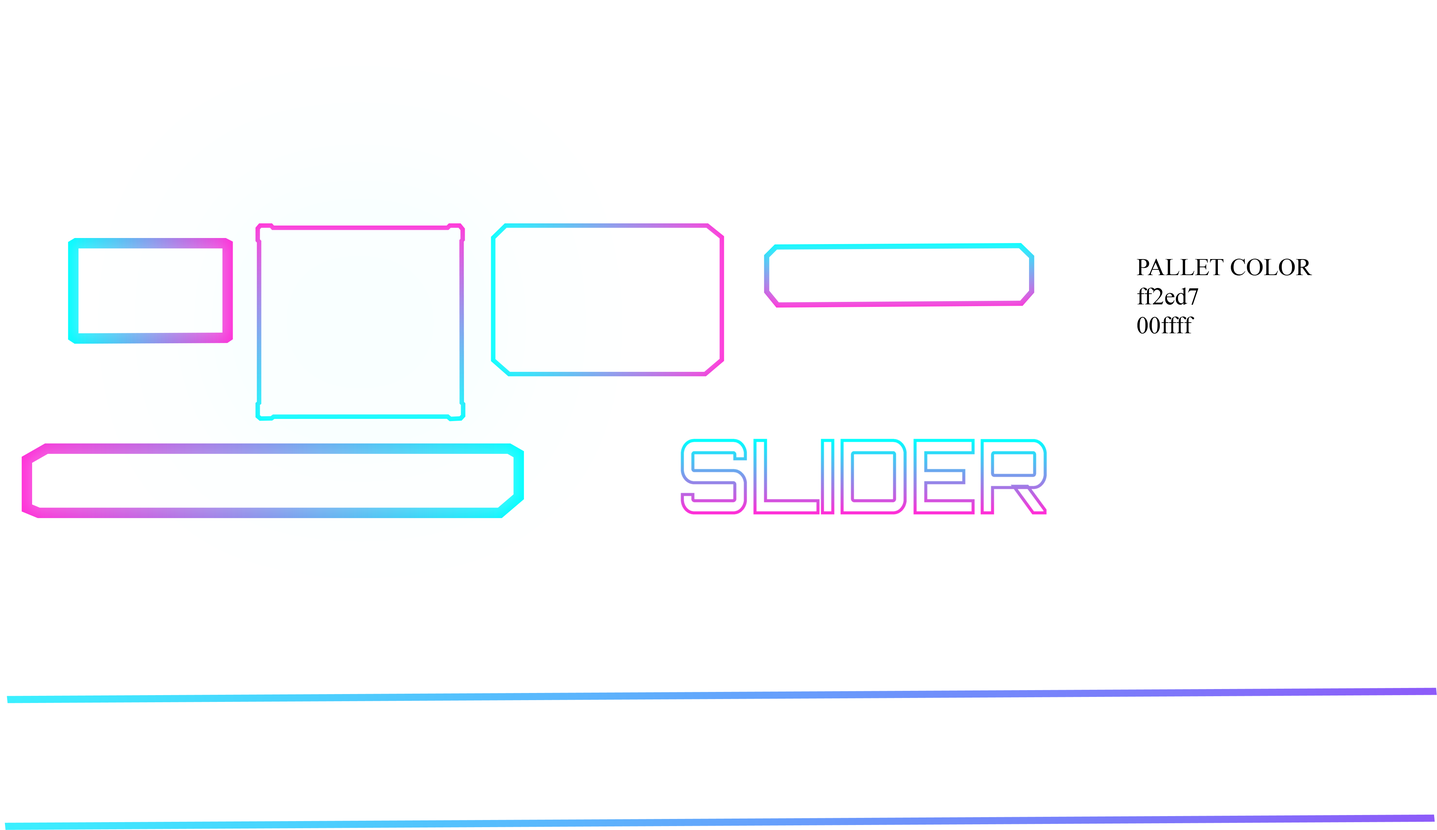
<style>
.page{position:relative;width:1437px;height:830px;background:#ffffff}
.page>*{position:absolute;margin:0}
.t1{font:24.2px "MyriadPro-Regular";color:#000000}
</style>
<div class="page">
<p class="t1" style="left:1137px;top:259px;width:175px;height:75px">PALLET COLOR<br>ff2ed7<br>00ffff</p>
</div>
